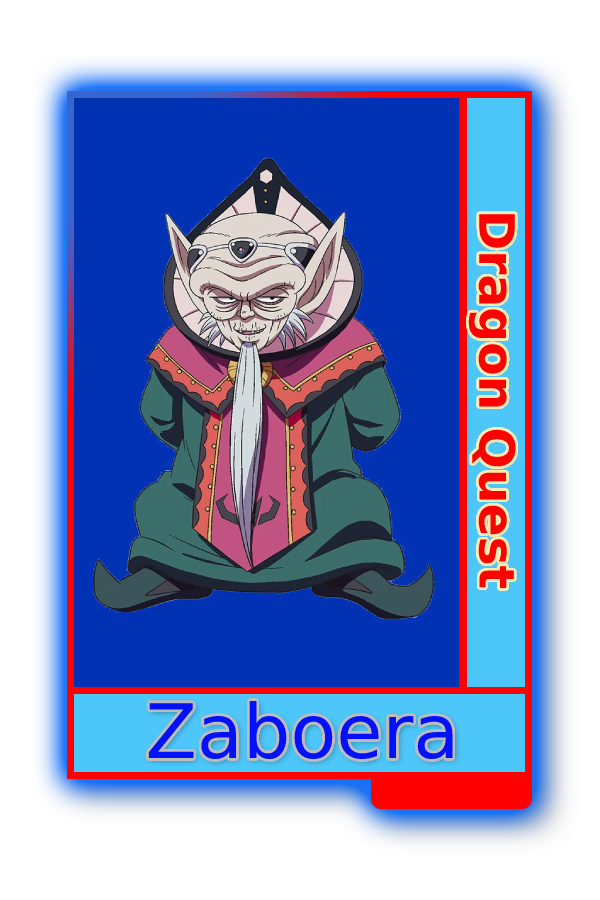
<style>
.page{position:relative;width:600px;height:900px;background:#0032b3}
.page>*{position:absolute;margin:0}
.t1{font:48.8px "MADETOMMY-Bold";color:#ff0000}
.t2{font:75px "CoolveticaRg-Regular";color:#0011fd}
</style>
<div class="page">
<p class="t1" style="left:468px;top:214px;width:48px;height:374px;rotate:90deg">Dragon Quest</p>
<p class="t2" style="left:148px;top:701px;width:305px;height:59px">Zaboera</p>
</div>
